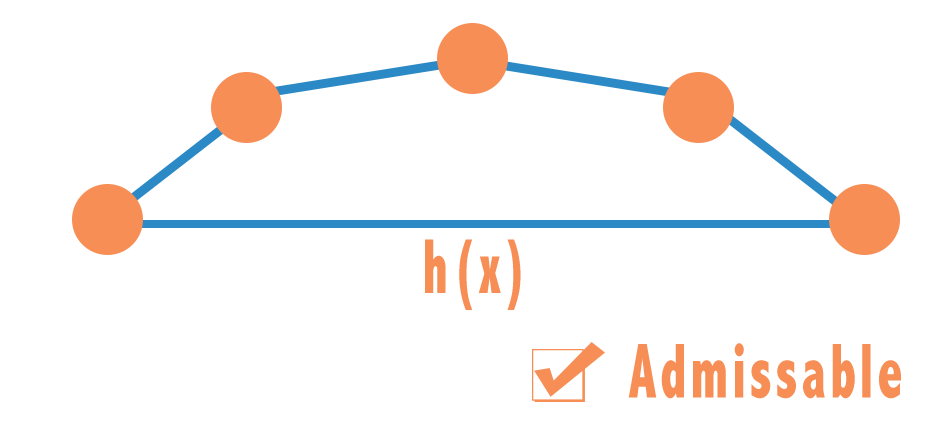
<style>
.page{position:relative;width:931px;height:423px;background:#ffffff}
.page>*{position:absolute;margin:0}
.t1{font:78.5px "AbadiMT-CondensedExtraBold";letter-spacing:0.075em;color:#f68e56;scale:0.68 1}
</style>
<div class="page">
<p class="t1" style="left:425px;top:239px;width:96px;height:71px">h(x)</p>
<p class="t1" style="left:628px;top:343px;width:273px;height:56px">Admissable</p>
</div>
